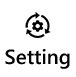
<style>
.page{position:relative;width:76px;height:77px;background:#ffffff}
.page>*{position:absolute;margin:0}
.t1{font:20.5px "YuGothicUI-Semibold";color:#000000}
</style>
<div class="page">
<p class="t1" style="left:5px;top:49px;width:65px;height:20px">Setting</p>
</div>
